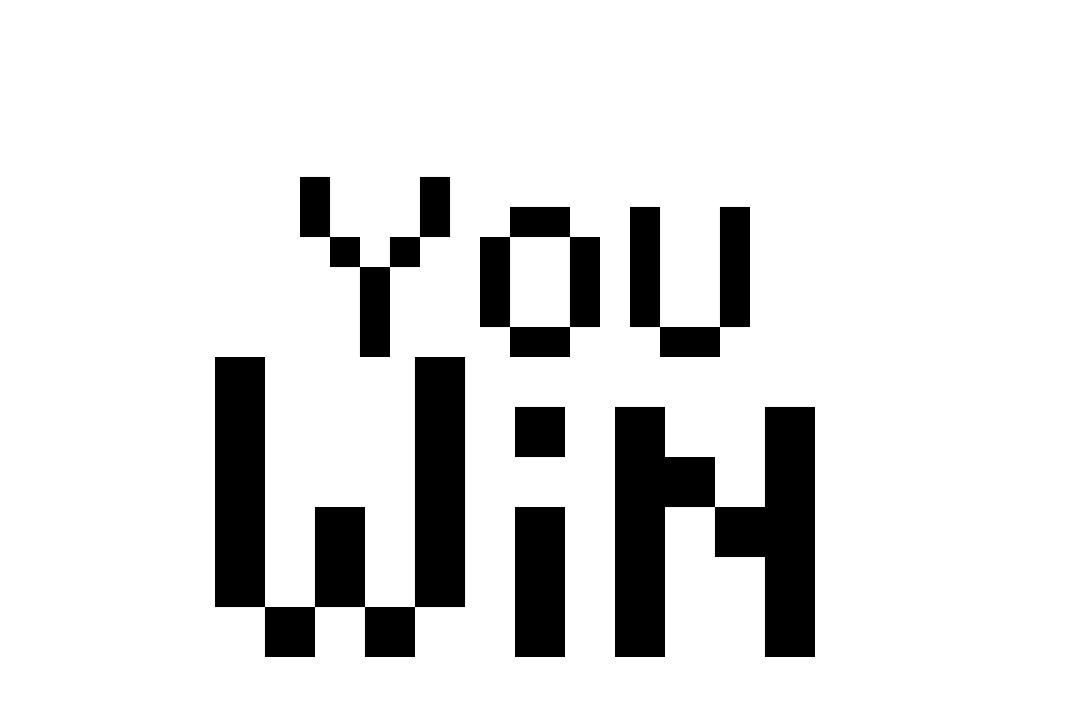
<style>
.page{position:relative;width:1080px;height:724px;background:#ffffff}
.page>*{position:absolute;margin:0}
.t1{font:150px "Pixeled";color:#000000}
.t2{font:250px "MyriadPro-Regular";color:#000000}
.t3{font:250px "Pixeled";color:#000000}
</style>
<div class="page">
<p class="t1" style="left:215px;top:176px;width:600px;height:481px;text-align:center"><span class="t2"><br></span>You <span class="t3">Win</span></p>
</div>
